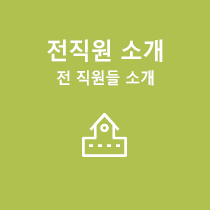
<style>
.page{position:relative;width:210px;height:210px;background:#b0c14f}
.page>*{position:absolute;margin:0}
.t1{font:16px/24px "MalgunGothicBold";letter-spacing:-0.025em;color:#ffffff;scale:0.95 1}
.t2{font:24px/24px "MalgunGothicBold";letter-spacing:-0.025em;color:#ffffff;scale:0.95 1}
</style>
<div class="page">
<p class="t1" style="left:47px;top:39px;width:116px;height:47px;text-align:center"><span class="t2">전직원 소개<br></span>전 직원들 소개</p>
</div>
